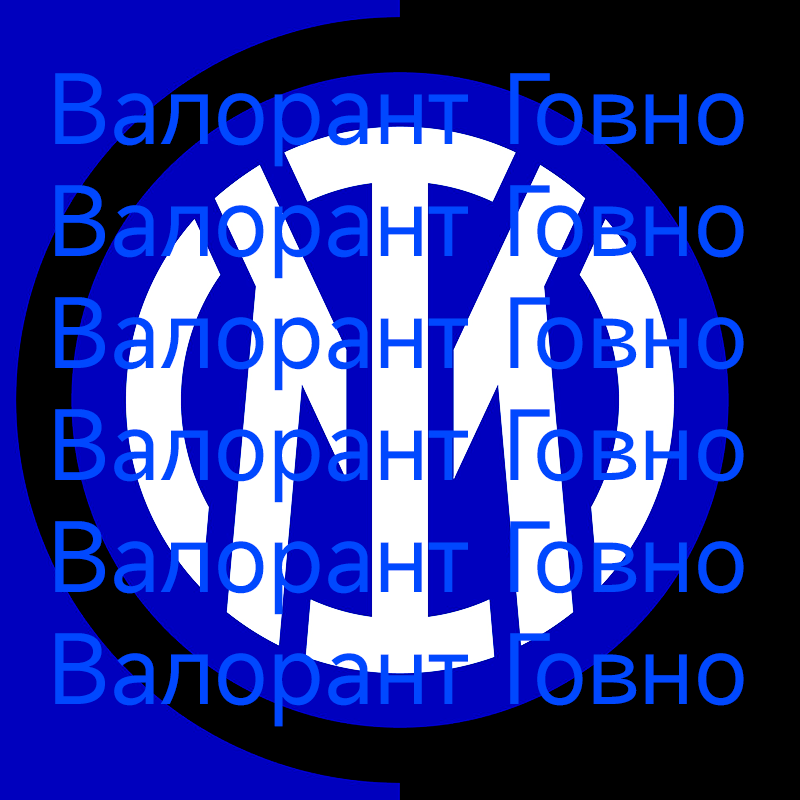
<style>
.page{position:relative;width:800px;height:800px;background:#0000be}
.page>*{position:absolute;margin:0}
.t1{font:93.3px "MiSans-Regular";color:#0048ff}
</style>
<div class="page">
<p class="t1" style="left:55px;top:73px;width:689px;height:654px">Валорант Говно<br>Валорант Говно<br>Валорант Говно<br>Валорант Говно<br>Валорант Говно<br>Валорант Говно</p>
</div>
